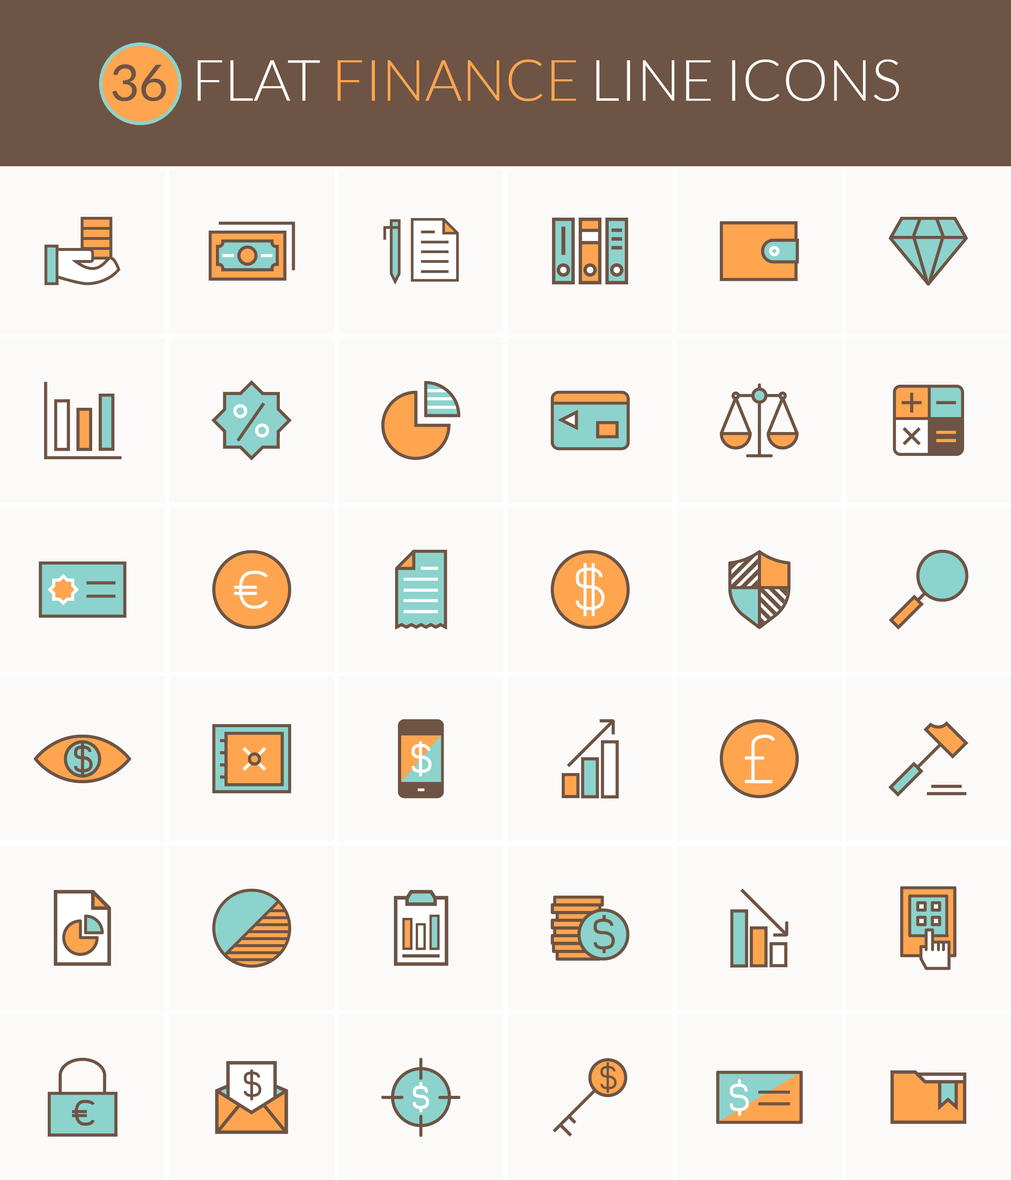
<style>
.page{position:relative;width:1011px;height:1180px;background:#fbfaf9}
.page>*{position:absolute;margin:0}
.t1{font:57.3px "Lato-Light";color:#ffffff}
.t2{font:50.5px "Lato-Regular";color:#6e5444}
.t3{font:57.3px "Lato-Light";color:#ffa550}
</style>
<div class="page">
<p class="t1" style="left:112px;top:59px;width:787px;height:42px"><span class="t2">36  </span>FLAT <span class="t3">FINANCE</span> LINE ICONS</p>
</div>
